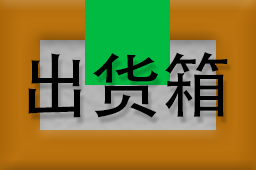
<style>
.page{position:relative;width:256px;height:170px}
.page>*{position:absolute;margin:0}
.t1{font:71px "AdobeHeitiStd-Regular";color:#000000}
</style>
<div class="page">
<p class="t1" style="left:28px;top:52px;width:200px;height:66px">出货箱</p>
</div>
